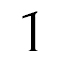
<style>
.page{position:relative;width:64px;height:64px;background:#ffffff}
.page>*{position:absolute;margin:0}
.t1{font:64px "Forum";color:#000000;text-transform:uppercase}
</style>
<div class="page">
<p class="t1" style="left:22px;top:11px;width:16px;height:40px">1</p>
</div>
